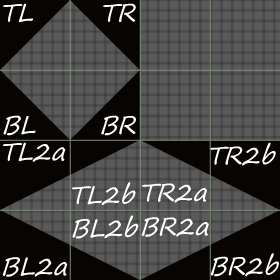
<style>
.page{position:relative;width:280px;height:280px;background:#080401}
.page>*{position:absolute;margin:0}
.t1{font:25px "SegoePrint";color:#ffffff;font-style:italic}
</style>
<div class="page">
<p class="t1" style="left:3px;top:3px;width:30px;height:20px">TL</p>
<p class="t1" style="left:103px;top:3px;width:33px;height:20px">TR</p>
<p class="t1" style="left:3px;top:115px;width:33px;height:21px">BL</p>
<p class="t1" style="left:101px;top:115px;width:35px;height:21px">BR</p>
<p class="t1" style="left:3px;top:142px;width:63px;height:20px">TL2a</p>
<p class="t1" style="left:209px;top:142px;width:67px;height:24px">TR2b</p>
<p class="t1" style="left:72px;top:182px;width:64px;height:23px">TL2b</p>
<p class="t1" style="left:142px;top:183px;width:65px;height:20px">TR2a</p>
<p class="t1" style="left:72px;top:215px;width:67px;height:24px">BL2b</p>
<p class="t1" style="left:141px;top:217px;width:68px;height:20px">BR2a</p>
<p class="t1" style="left:2px;top:257px;width:66px;height:20px">BL2a</p>
<p class="t1" style="left:210px;top:253px;width:69px;height:24px">BR2b</p>
</div>
